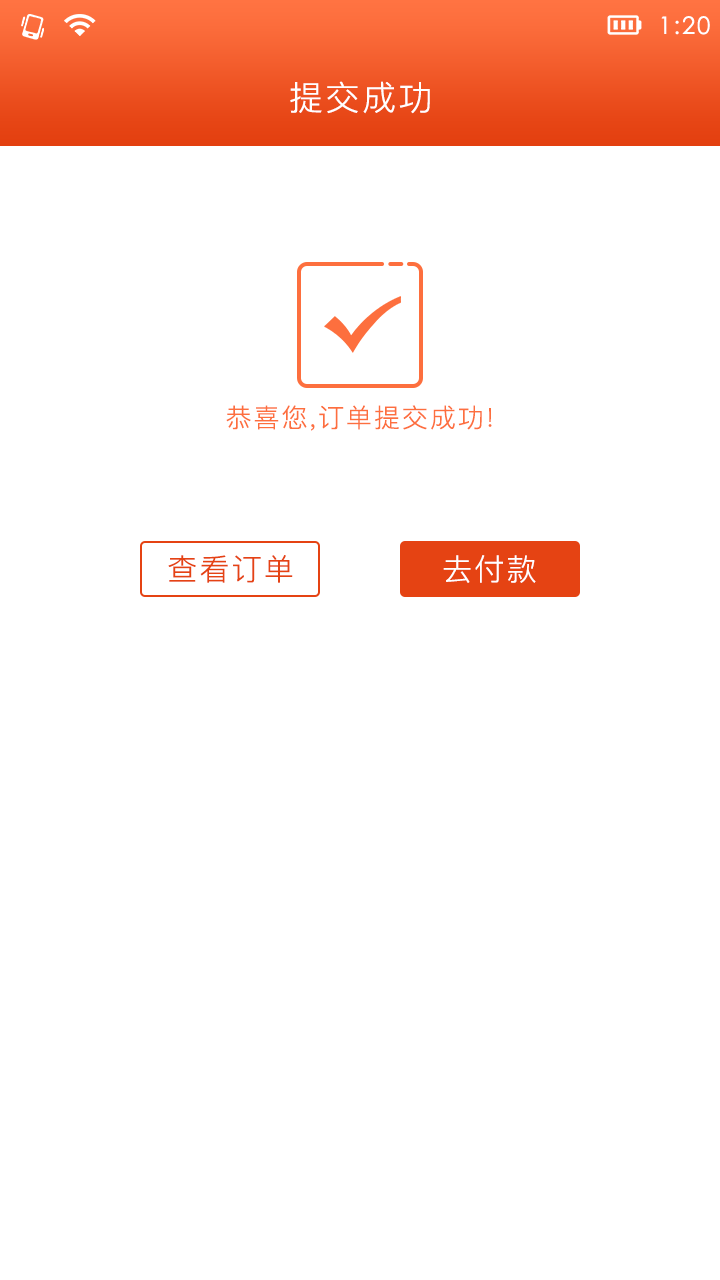
<style>
.page{position:relative;width:720px;height:1280px;background:#ffffff}
.page>*{position:absolute;margin:0}
.t1{font:24px "STXihei";letter-spacing:0.075em;color:#ffffff}
.t2{font:34px "PingFangSC-Light";letter-spacing:0.075em;color:#ffffff}
.t3{font:26px "PingFangSC-Light";letter-spacing:0.075em;color:#fd6f3e}
.t4{font:30px "PingFangSC-Light";letter-spacing:0.075em;color:#e54313}
.t5{font:30px "PingFangSC-Light";letter-spacing:0.075em;color:#ffffff}
</style>
<div class="page">
<p class="t1" style="left:661px;top:16px;width:49px;height:19px">1:20</p>
<p class="t2" style="left:290px;top:81px;width:140px;height:33px">提交成功</p>
<p class="t3" style="left:226px;top:405px;width:266px;height:26px">恭喜您,订单提交成功!</p>
<p class="t4" style="left:168px;top:555px;width:125px;height:28px">查看订单</p>
<p class="t5" style="left:443px;top:555px;width:93px;height:28px">去付款</p>
</div>
